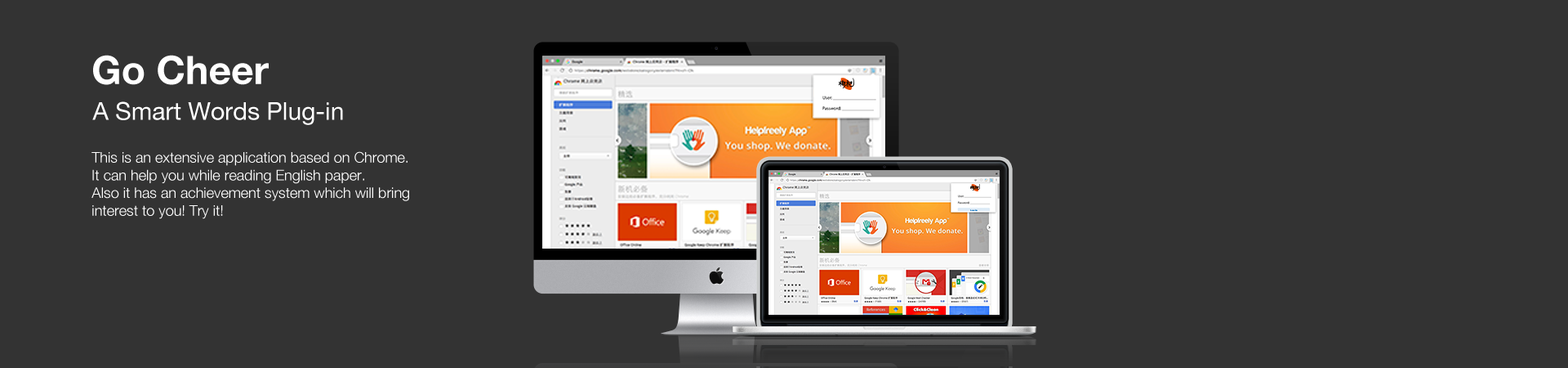
<style>
.page{position:relative;width:1568px;height:368px;background:#333333}
.page>*{position:absolute;margin:0}
.t1{font:39.2px "HelveticaNeue-Bold";color:#ffffff}
.t2{font:24.5px "HelveticaNeue";color:#ffffff}
.t3{font:14.7px "HelveticaNeue-Light";color:#ffffff}
</style>
<div class="page">
<p class="t1" style="left:93px;top:55px;width:176px;height:30px">Go Cheer</p>
<p class="t2" style="left:92px;top:101px;width:251px;height:24px">A Smart Words Plug-in</p>
<p class="t3" style="left:91px;top:151px;width:318px;height:68px">This is an extensive application based on Chrome.<br>It can help you while reading English paper. <br>Also it has an achievement system which will bring interest to you! Try it!</p>
</div>
